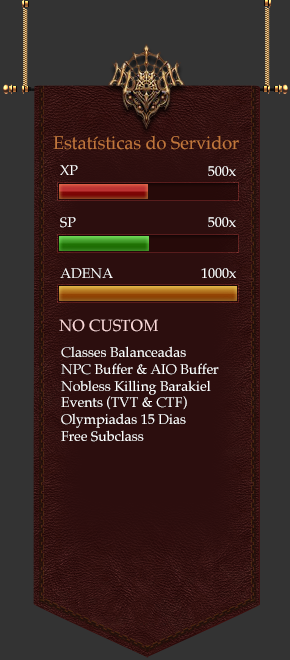
<style>
.page{position:relative;width:290px;height:660px;background:#333333}
.page>*{position:absolute;margin:0}
.t1{font:18px "Palatino-Roman";color:#c1763c}
.t2{font:14px "Palatino-Roman";color:#ffffff}
.t3{font:16px "Palatino-Roman";color:#fcd8d8}
</style>
<div class="page">
<p class="t1" style="left:53px;top:135px;width:186px;height:15px">Estatísticas do Servidor</p>
<p class="t2" style="left:60px;top:165px;width:18px;height:10px">XP</p>
<p class="t2" style="left:208px;top:166px;width:28px;height:10px">500x</p>
<p class="t2" style="left:60px;top:217px;width:16px;height:11px">SP</p>
<p class="t2" style="left:208px;top:217px;width:28px;height:10px">500x</p>
<p class="t2" style="left:60px;top:268px;width:53px;height:11px">ADENA</p>
<p class="t2" style="left:201px;top:268px;width:35px;height:10px">1000x</p>
<p class="t3" style="left:59px;top:319px;width:99px;height:13px">NO CUSTOM</p>
<p class="t2" style="left:61px;top:346px;width:158px;height:96px">Classes Balanceadas<br>NPC Buffer &amp; AIO Buffer<br>Nobless Killing Barakiel<br>Events (TVT &amp; CTF)<br>Olympiadas 15 Dias<br>Free Subclass</p>
</div>
